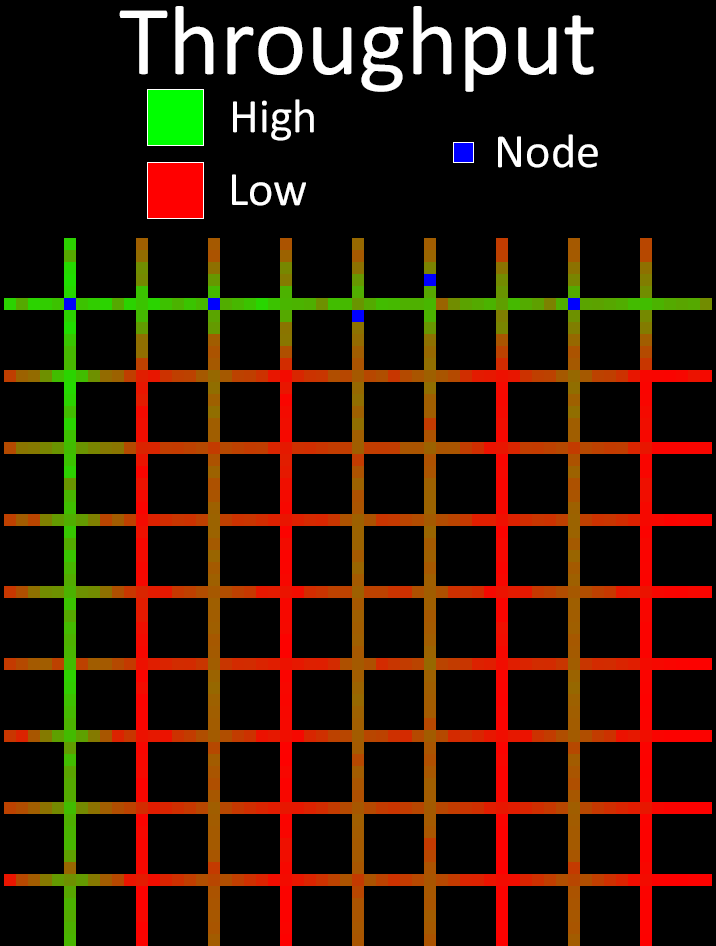
<style>
.page{position:relative;width:716px;height:946px;background:#000000}
.page>*{position:absolute;margin:0}
.t1{font:100px "Calibri";color:#ffffff}
.t2{font:48px "Calibri";color:#ffffff}
</style>
<div class="page">
<p class="t1" style="left:119px;top:6px;width:475px;height:86px">Throughput</p>
<p class="t2" style="left:233px;top:99px;width:81px;height:42px">High</p>
<p class="t2" style="left:498px;top:134px;width:100px;height:34px">Node</p>
<p class="t2" style="left:232px;top:174px;width:74px;height:32px">Low</p>
</div>
